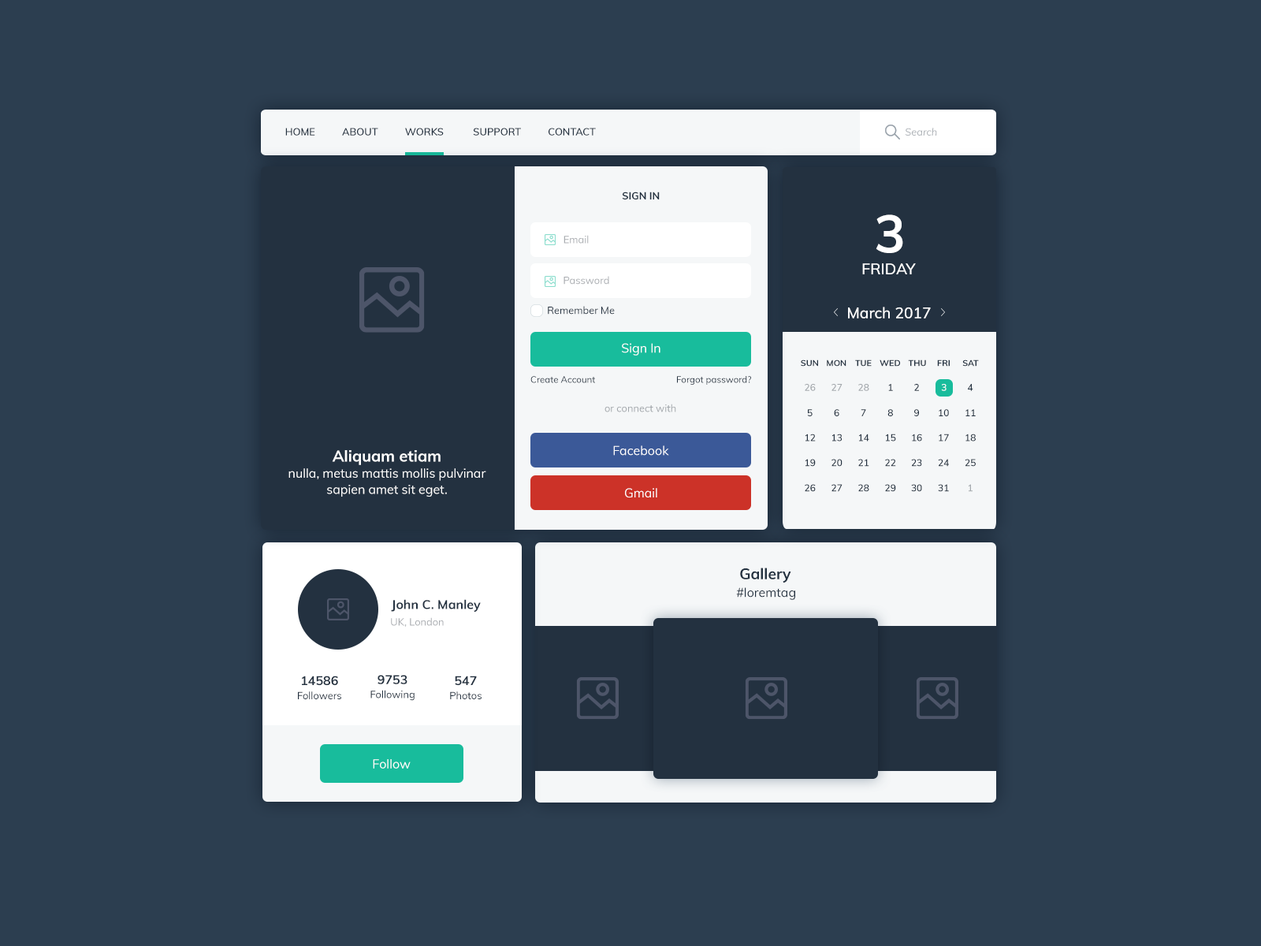
<style>
.page{position:relative;width:1261px;height:946px;background:#2c3e50}
.page>*{position:absolute;margin:0}
.t1{font:10.1px "Muli-SemiBold";color:#233140;text-transform:uppercase}
.t2{font:10.1px "Muli-Italic";color:#abb0b5}
.t3{font:10.1px "Muli-Bold";color:#233140;text-transform:uppercase}
.t4{font:52.5px "Muli-Bold";color:#ffffff}
.t5{font:10.1px "Muli-Regular";color:#a9acb0}
.t6{font:15.1px "Muli-SemiBold";color:#ffffff;text-transform:uppercase}
.t7{font:10.1px "Muli-Regular";color:#233140}
.t8{font:15.1px "Muli-SemiBold";color:#ffffff}
.t9{font:12.6px "Muli-Regular";color:#ffffff}
.t10{font:8.5px "Muli-Bold";color:#233140;text-transform:uppercase}
.t11{font:9.1px "Muli-Regular"}
.t12{font:9.1px "Muli-Regular";color:#233140}
.t13{font:9.4px "Muli-SemiBold";color:#a2a7ac;text-transform:uppercase}
.t14{font:9.4px "Muli-SemiBold";text-transform:uppercase}
.t15{font:9.4px "Muli-SemiBold";color:#233140;text-transform:uppercase}
.t16{font:9.4px "Muli-SemiBold";color:#ffffff;text-transform:uppercase}
.t17{font:10.1px "Muli-Regular";color:#a2a7ac}
.t18{font:12.6px/16.1px "Muli-Regular";color:#ffffff}
.t19{font:15.6px/16.1px "Muli-Bold";color:#ffffff}
.t20{font:15.1px "Muli-Bold";color:#233140}
.t21{font:12.6px "Muli-Regular";color:#233140}
.t22{font:12.6px "Muli-Bold";color:#233140}
.t23{font:10.1px/14.1px "Muli-Regular";color:#233140}
.t24{font:12.6px/14.1px "Muli-Bold";color:#233140}
</style>
<div class="page">
<p class="t1" style="left:285px;top:128px;width:311px;height:8px">Home          About          works           support          contact</p>
<p class="t2" style="left:905px;top:128px;width:32px;height:8px">Search</p>
<p class="t3" style="left:622px;top:192px;width:38px;height:7px">Sign in</p>
<p class="t4" style="left:876px;top:214px;width:27px;height:39px">3</p>
<p class="t5" style="left:563px;top:235px;width:26px;height:9px">Email</p>
<p class="t6" style="left:862px;top:263px;width:54px;height:11px">Friday</p>
<p class="t5" style="left:563px;top:276px;width:46px;height:8px">Password</p>
<p class="t7" style="left:548px;top:306px;width:67px;height:8px">Remember Me</p>
<p class="t8" style="left:848px;top:307px;width:83px;height:11px">March 2017</p>
<p class="t9" style="left:622px;top:343px;width:38px;height:12px">Sign In</p>
<p class="t10" style="left:801px;top:359px;width:17px;height:7px">Sun</p>
<p class="t10" style="left:827px;top:359px;width:19px;height:7px">Mon</p>
<p class="t10" style="left:855px;top:359px;width:17px;height:7px">Tue</p>
<p class="t10" style="left:879px;top:359px;width:21px;height:7px">Wed</p>
<p class="t10" style="left:908px;top:359px;width:18px;height:7px">Thu</p>
<p class="t10" style="left:937px;top:359px;width:13px;height:7px">Fri</p>
<p class="t10" style="left:962px;top:359px;width:17px;height:7px">Sat</p>
<p class="t11" style="left:530px;top:376px;width:65px;height:7px">Create Account</p>
<p class="t12" style="left:677px;top:376px;width:74px;height:9px">Forgot password?</p>
<p class="t13" style="left:805px;top:384px;width:11px;height:7px">26</p>
<p class="t13" style="left:831px;top:384px;width:11px;height:7px">27</p>
<p class="t13" style="left:858px;top:384px;width:11px;height:7px">28</p>
<p class="t14" style="left:888px;top:384px;width:5px;height:7px">1</p>
<p class="t15" style="left:914px;top:384px;width:5px;height:7px">2</p>
<p class="t16" style="left:941px;top:384px;width:5px;height:7px">3</p>
<p class="t15" style="left:968px;top:384px;width:5px;height:7px">4</p>
<p class="t17" style="left:604px;top:403px;width:72px;height:9px">or connect with</p>
<p class="t15" style="left:807px;top:409px;width:6px;height:7px">5</p>
<p class="t15" style="left:834px;top:409px;width:5px;height:7px">6</p>
<p class="t15" style="left:861px;top:409px;width:5px;height:7px">7</p>
<p class="t15" style="left:887px;top:409px;width:6px;height:7px">8</p>
<p class="t15" style="left:914px;top:409px;width:5px;height:7px">9</p>
<p class="t15" style="left:939px;top:409px;width:10px;height:7px">10</p>
<p class="t15" style="left:965px;top:409px;width:11px;height:7px">11</p>
<p class="t15" style="left:805px;top:433px;width:11px;height:8px">12</p>
<p class="t15" style="left:832px;top:433px;width:10px;height:8px">13</p>
<p class="t15" style="left:859px;top:433px;width:10px;height:8px">14</p>
<p class="t15" style="left:886px;top:433px;width:10px;height:8px">15</p>
<p class="t15" style="left:912px;top:433px;width:10px;height:8px">16</p>
<p class="t15" style="left:939px;top:433px;width:10px;height:8px">17</p>
<p class="t15" style="left:965px;top:433px;width:11px;height:8px">18</p>
<p class="t18" style="left:288px;top:450px;width:198px;height:46px;text-align:center"><span class="t19">Aliquam etiam<br></span>nulla, metus mattis mollis pulvinar sapien amet sit eget.</p>
<p class="t9" style="left:613px;top:445px;width:56px;height:11px">Facebook</p>
<p class="t15" style="left:805px;top:459px;width:11px;height:8px">19</p>
<p class="t15" style="left:831px;top:459px;width:11px;height:8px">20</p>
<p class="t15" style="left:858px;top:459px;width:11px;height:8px">21</p>
<p class="t15" style="left:885px;top:459px;width:11px;height:8px">22</p>
<p class="t15" style="left:911px;top:459px;width:11px;height:8px">23</p>
<p class="t15" style="left:938px;top:459px;width:11px;height:8px">24</p>
<p class="t15" style="left:965px;top:459px;width:11px;height:8px">25</p>
<p class="t15" style="left:805px;top:484px;width:11px;height:8px">26</p>
<p class="t15" style="left:831px;top:484px;width:11px;height:8px">27</p>
<p class="t15" style="left:858px;top:484px;width:11px;height:8px">28</p>
<p class="t15" style="left:885px;top:484px;width:11px;height:8px">29</p>
<p class="t15" style="left:911px;top:484px;width:11px;height:8px">30</p>
<p class="t15" style="left:938px;top:484px;width:11px;height:8px">31</p>
<p class="t13" style="left:969px;top:484px;width:3px;height:8px">1</p>
<p class="t9" style="left:625px;top:488px;width:32px;height:10px">Gmail</p>
<p class="t20" style="left:740px;top:567px;width:51px;height:16px">Gallery</p>
<p class="t21" style="left:736px;top:587px;width:59px;height:13px">#loremtag</p>
<p class="t22" style="left:391px;top:599px;width:90px;height:13px">John C. Manley</p>
<p class="t5" style="left:391px;top:617px;width:53px;height:10px">UK, London</p>
<p class="t23" style="left:298px;top:675px;width:43px;height:24px;text-align:center"><span class="t24">14586<br></span>Followers</p>
<p class="t23" style="left:370px;top:675px;width:45px;height:26px;text-align:center"><span class="t24">9753<br></span>Following</p>
<p class="t23" style="left:450px;top:675px;width:32px;height:24px;text-align:center"><span class="t24">547<br></span>Photos</p>
<p class="t9" style="left:373px;top:759px;width:38px;height:9px">Follow</p>
</div>
